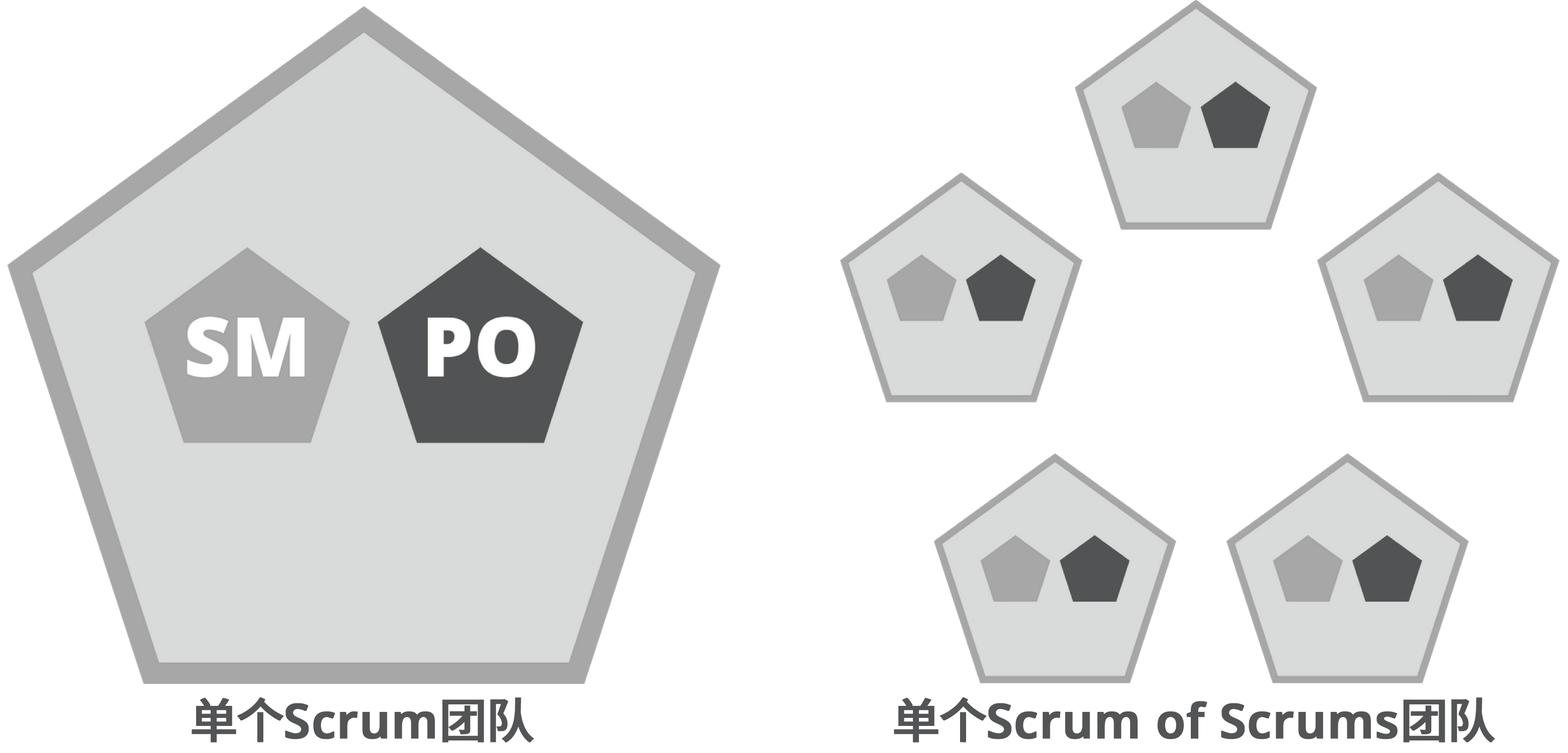
<style>
.page{position:relative;width:1568px;height:753px;background:#ffffff}
.page>*{position:absolute;margin:0}
.t1{font:48.2px "NotoSans-SemiBold";color:#535455;font-weight:bold}
.t2{font:48.2px "NotoSansCJKsc-Medium";letter-spacing:-0.05em;color:#535455;font-weight:bold}
</style>
<div class="page">
<p class="t1" style="left:192px;top:698px;width:342px;height:45px"><span class="t2">单个</span>Scrum<span class="t2">团队</span></p>
<p class="t1" style="left:894px;top:698px;width:601px;height:45px"><span class="t2">单个</span>Scrum of Scrums<span class="t2">团队</span></p>
</div>
